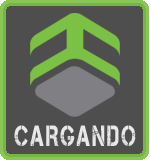
<style>
.page{position:relative;width:150px;height:160px;background:#4e4e4e}
.page>*{position:absolute;margin:0}
.t1{font:29.2px "Captureit";letter-spacing:0.1em;color:#ffffff;scale:0.71 1}
</style>
<div class="page">
<p class="t1" style="left:14px;top:125px;width:122px;height:22px;opacity:0.87">CARGANDO</p>
</div>
